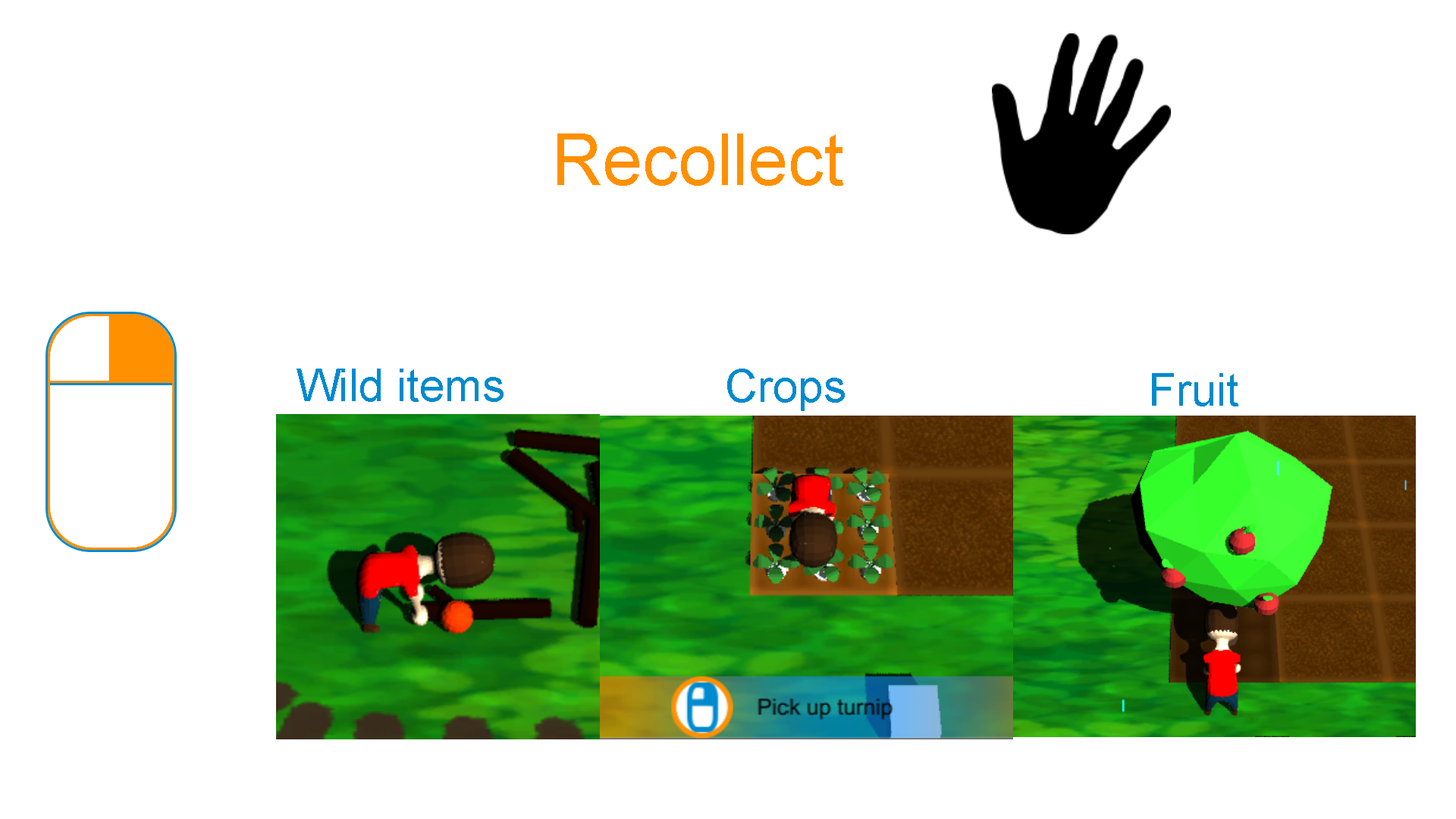
<style>
.page{position:relative;width:1456px;height:819px;background:#ffffff}
.page>*{position:absolute;margin:0}
.t1{font:70.9px "ArialMT";color:#ff9000}
.t2{font:45.5px "ArialMT";color:#008acf}
</style>
<div class="page">
<p class="t1" style="left:557px;top:133px;width:286px;height:53px">Recollect</p>
<p class="t2" style="left:297px;top:369px;width:207px;height:33px">Wild items</p>
<p class="t2" style="left:727px;top:369px;width:118px;height:42px">Crops</p>
<p class="t2" style="left:1152px;top:373px;width:86px;height:33px">Fruit</p>
</div>
